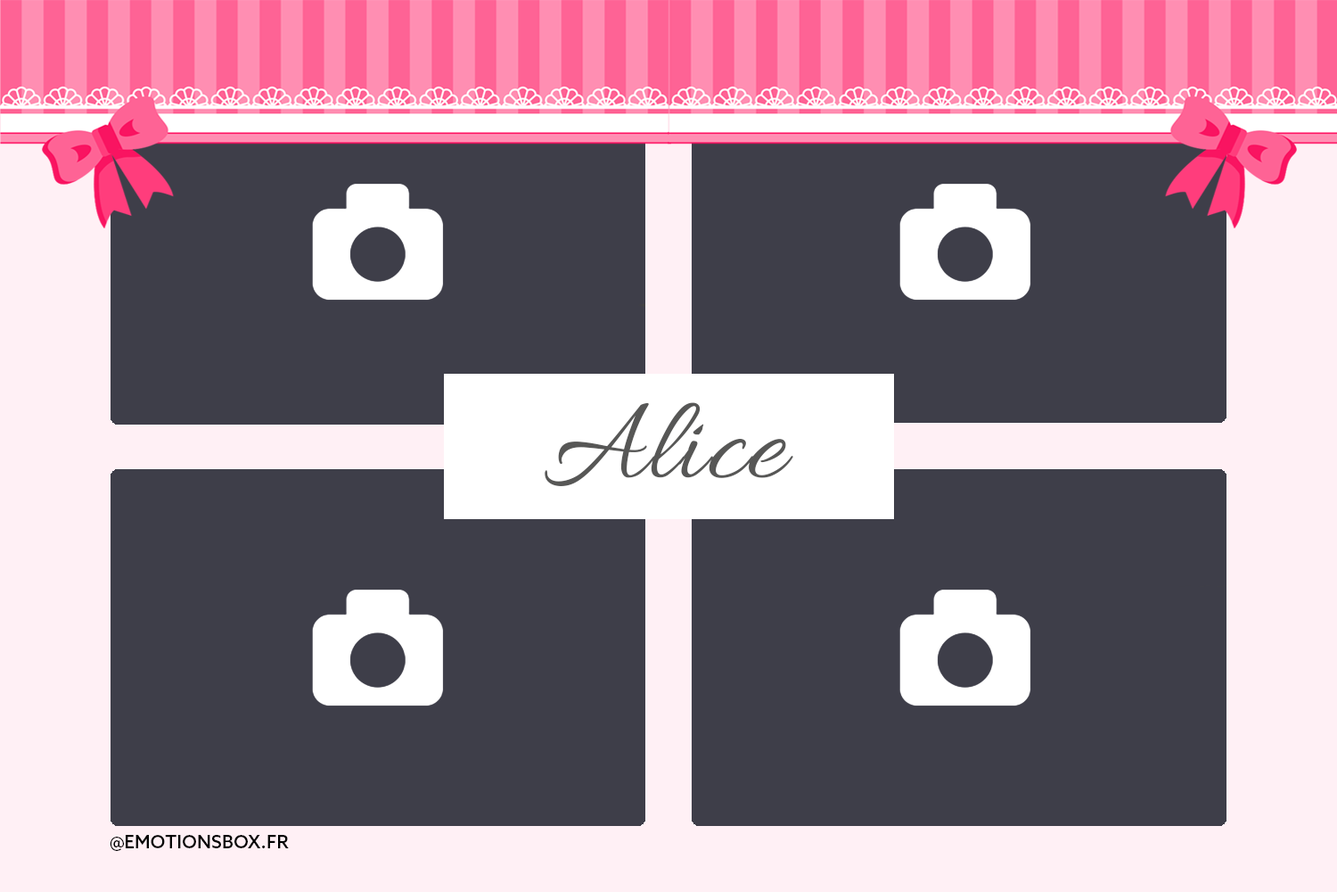
<style>
.page{position:relative;width:1337px;height:892px;background:#3e3e49}
.page>*{position:absolute;margin:0}
.t1{font:121.7px "Allura-Regular";letter-spacing:0.01em;color:#575756}
.t2{font:18.1px "AzoSans-Medium";letter-spacing:0.01em;color:#000000}
</style>
<div class="page">
<p class="t1" style="left:545px;top:402px;width:249px;height:84px">Alice</p>
<p class="t2" style="left:110px;top:835px;width:179px;height:16px">@EMOTIONSBOX.FR</p>
</div>
